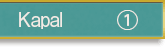
<style>
.page{position:relative;width:165px;height:47px}
.page>*{position:absolute;margin:0}
.t1{font:18px "GothicMB101Pro-Regular";letter-spacing:-0.04em;color:#f2ebe5;scale:0.9 1}
</style>
<div class="page">
<p class="t1" style="left:19px;top:12px;width:43px;height:17px">Kapal</p>
</div>
